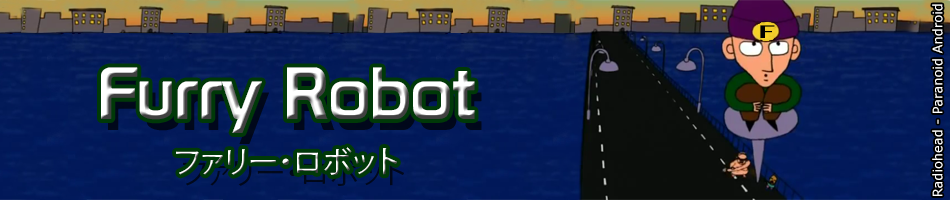
<style>
.page{position:relative;width:950px;height:200px}
.page>*{position:absolute;margin:0}
.t1{font:13px "Verdana";color:#ffffff}
.t2{font:18px "Fixedsys";color:#000000;scale:1.67 1}
.t3{font:72px "Prototype"}
.t4{font:30px "KozGoPr6N-Regular"}
</style>
<div class="page">
<p class="t1" style="left:932px;top:4px;width:11px;height:192px;rotate:-90deg">Radiohead - Paranoid Android</p>
<p class="t2" style="left:760px;top:25px;width:15px;height:13px">F</p>
<p class="t3" style="left:101px;top:67px;width:374px;height:66px">Furry Robot</p>
<p class="t4" style="left:176px;top:147px;width:221px;height:28px">ファリー・ロボット</p>
</div>
